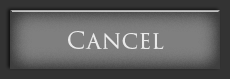
<style>
.page{position:relative;width:230px;height:79px;background:#333333}
.page>*{position:absolute;margin:0}
.t1{font:24px "TrajanPro3-Regular";color:#e9e9e9}
</style>
<div class="page">
<p class="t1" style="left:68px;top:31px;width:96px;height:18px">Cancel</p>
</div>
